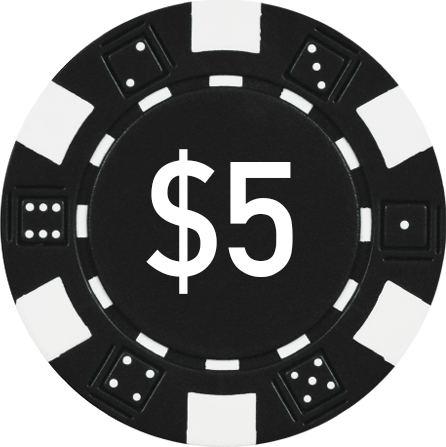
<style>
.page{position:relative;width:446px;height:447px;background:#ffffff}
.page>*{position:absolute;margin:0}
.t1{font:160px "DINAlternate-Bold";color:#ffffff}
</style>
<div class="page">
<p class="t1" style="left:146px;top:149px;width:147px;height:145px">$5</p>
</div>
